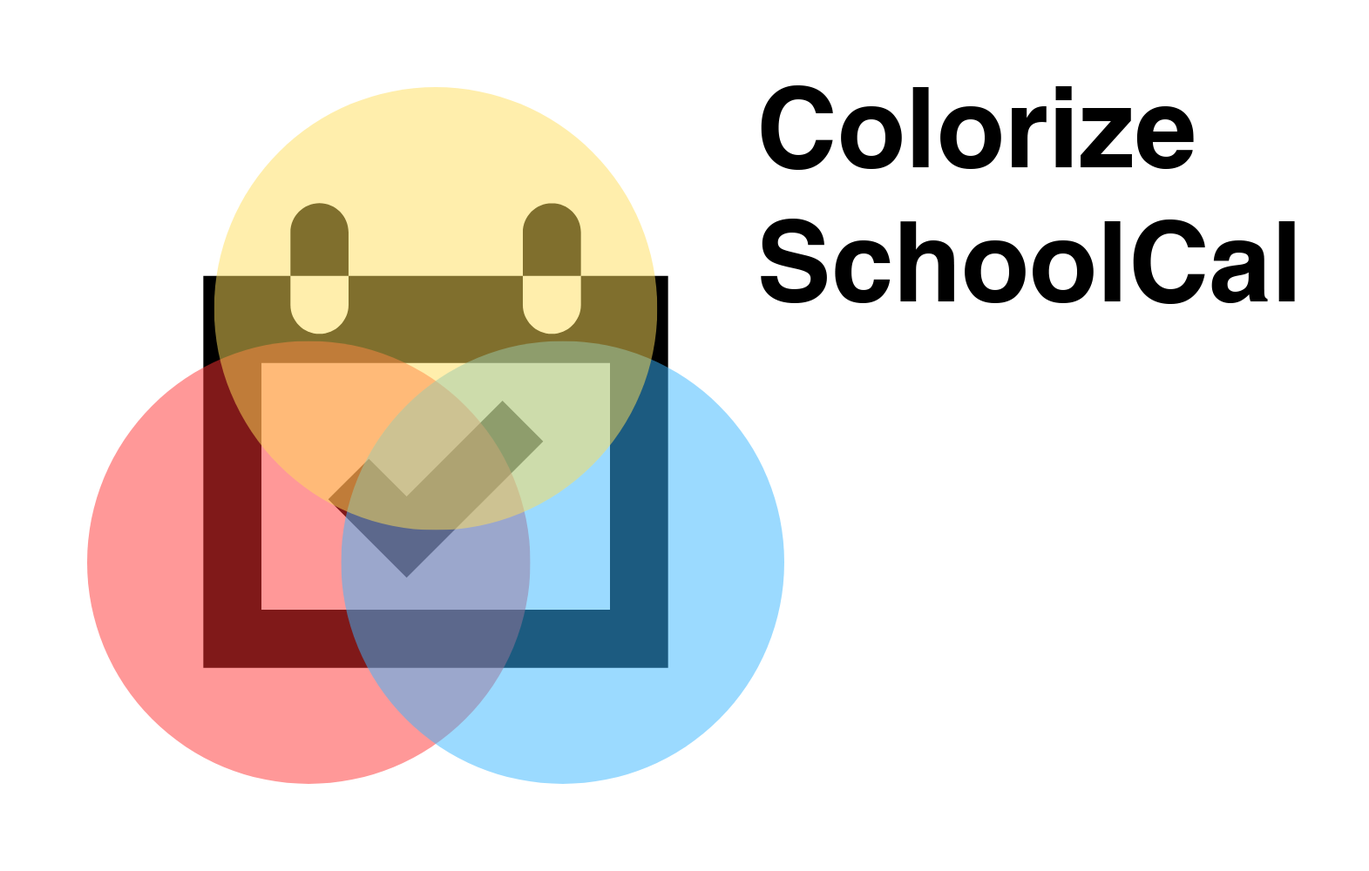
<style>
.page{position:relative;width:1369px;height:871px;background:#ffffff}
.page>*{position:absolute;margin:0}
.t1{font:111.5px "Helvetica-Bold";color:#000000}
</style>
<div class="page">
<p class="t1" style="left:761px;top:85px;width:534px;height:219px">Colorize<br>SchoolCal</p>
</div>
